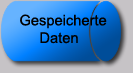
<style>
.page{position:relative;width:133px;height:73px}
.page>*{position:absolute;margin:0}
.t1{font:14.7px "ArialMT";color:#000000}
</style>
<div class="page">
<p class="t1" style="left:20px;top:14px;width:87px;height:30px;text-align:center">Gespeicherte<br>Daten</p>
</div>
